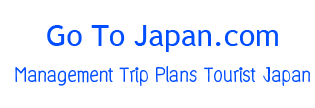
<style>
.page{position:relative;width:315px;height:108px;background:#ffffff}
.page>*{position:absolute;margin:0}
.t1{font:30px "WaffleRegular";color:#004eff}
.t2{font:30px "TrebuchetMS";color:#004eff}
</style>
<div class="page">
<p class="t1" style="left:15px;top:25px;width:295px;height:61px;text-align:center"><span class="t2">Go To Japan.com<br></span>Management Trip Plans Tourist Japan</p>
</div>
